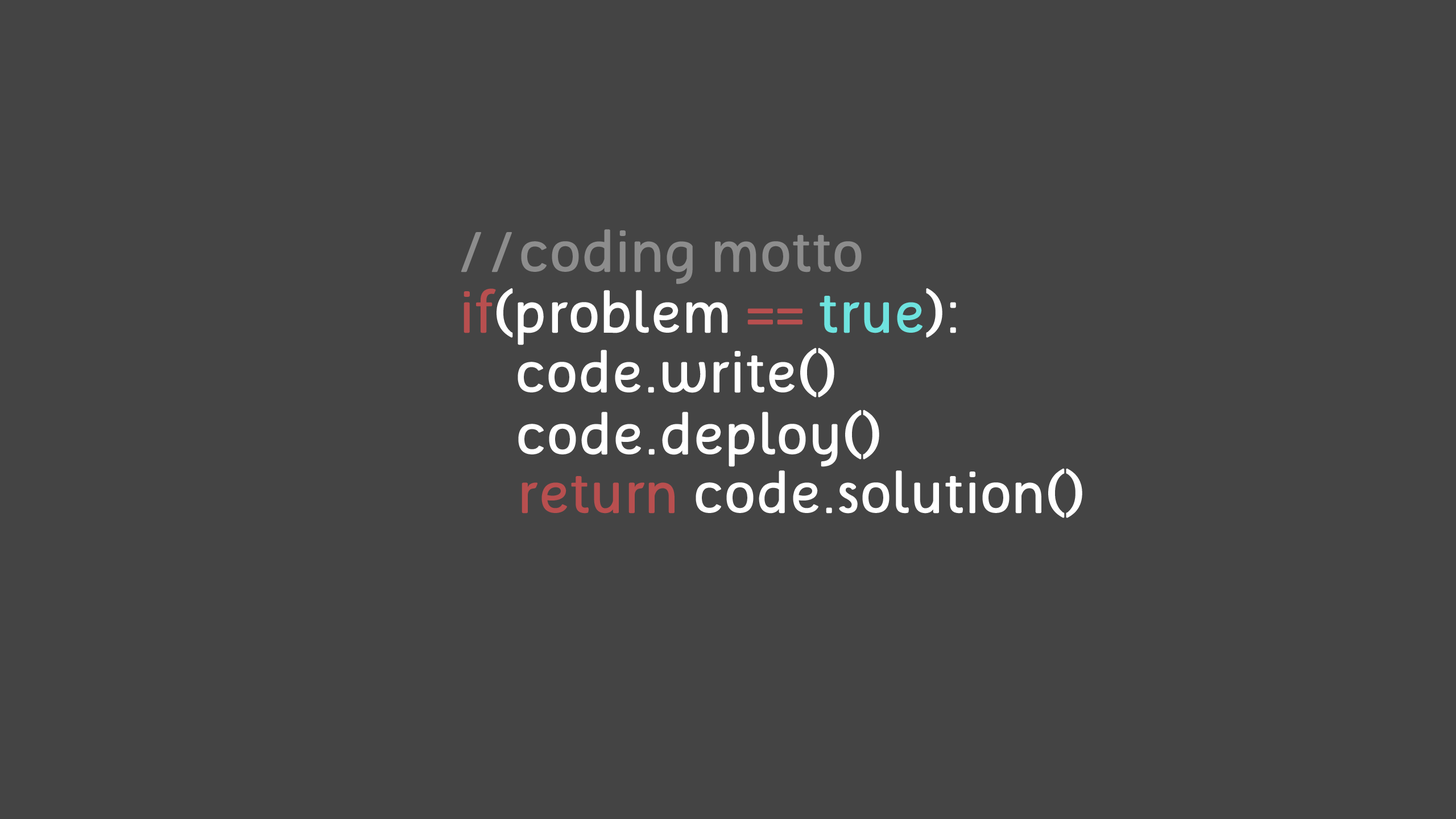
<style>
.page{position:relative;width:1456px;height:819px;background:#444444}
.page>*{position:absolute;margin:0}
.t1{font:56.9px "TelluralAlt";color:#8d8d8d}
.t2{font:56.9px "TelluralAlt";color:#ffffff}
.t3{font:56.9px "TelluralAlt";color:#b84f4f}
.t4{font:56.9px "TelluralAlt";color:#6ee3df}
</style>
<div class="page">
<p class="t1" style="left:461px;top:229px;width:401px;height:55px">//coding motto</p>
<p class="t2" style="left:464px;top:288px;width:492px;height:57px"><span class="t3">if</span>(problem <span class="t3">== </span><span class="t4">true</span>):</p>
<p class="t2" style="left:518px;top:348px;width:316px;height:50px">code.write()</p>
<p class="t2" style="left:518px;top:409px;width:361px;height:58px">code.deploy()</p>
<p class="t2" style="left:522px;top:468px;width:560px;height:50px"><span class="t3">return </span>code.solution()</p>
</div>
